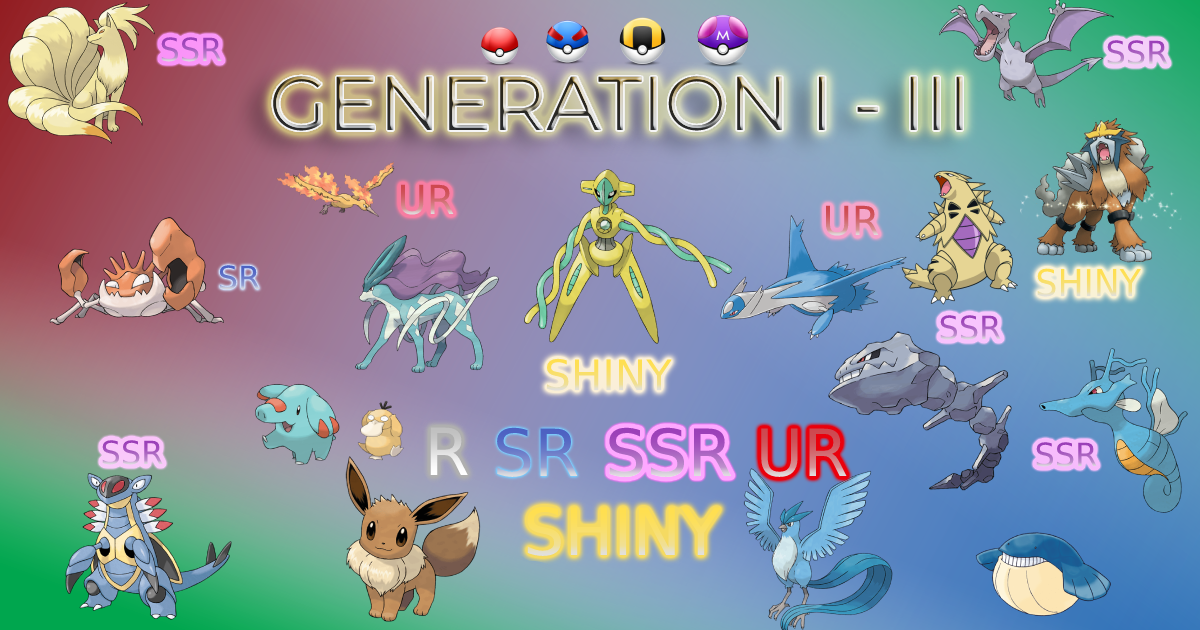
<style>
.page{position:relative;width:1200px;height:630px}
.page>*{position:absolute;margin:0}
.t1{font:32px "DejaVuSans"}
.t2{font:76px "Montserrat-Regular"}
.t3{font:40px "DejaVuSans"}
.t4{font:36.9px "DejaVuSans";scale:0.94 1}
.t5{font:42px "DejaVuSans"}
</style>
<div class="page">
<p class="t1" style="left:161px;top:37px;width:61px;height:25px">SSR</p>
<p class="t1" style="left:1107px;top:40px;width:61px;height:25px">SSR</p>
<p class="t2" style="left:273px;top:76px;width:690px;height:55px">GENERATION I - III</p>
<p class="t3" style="left:401px;top:184px;width:53px;height:31px">UR</p>
<p class="t3" style="left:825px;top:205px;width:54px;height:31px">UR</p>
<p class="t1" style="left:219px;top:265px;width:41px;height:25px">SR</p>
<p class="t4" style="left:1037px;top:268px;width:104px;height:29px">SHINY</p>
<p class="t1" style="left:940px;top:315px;width:61px;height:25px">SSR</p>
<p class="t5" style="left:547px;top:358px;width:125px;height:33px">SHINY</p>
<p class="t1" style="left:102px;top:440px;width:61px;height:25px">SSR</p>
<p class="t1" style="left:1036px;top:442px;width:61px;height:25px">SSR</p>
</div>
